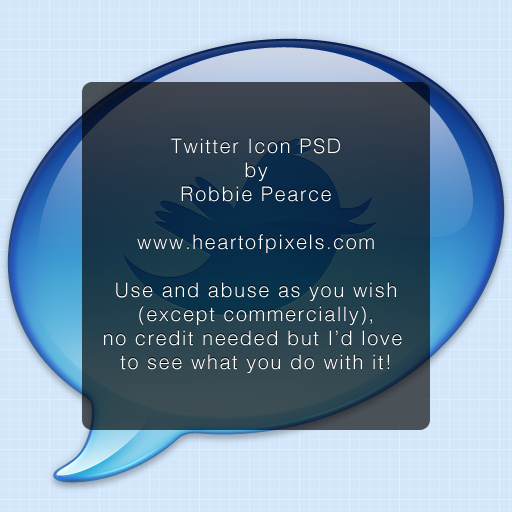
<style>
.page{position:relative;width:512px;height:512px;background:#d4e7fa}
.page>*{position:absolute;margin:0}
.t1{font:20px "Helvetica-Light";letter-spacing:0.075em;color:#ffffff}
</style>
<div class="page">
<p class="t1" style="left:104px;top:138px;width:298px;height:235px;text-align:center">Twitter Icon PSD<br>by<br>Robbie Pearce<br><br>www.heartofpixels.com<br><br>Use and abuse as you wish<br>(except commercially),<br>no credit needed but I’d love <br>to see what you do with it!</p>
</div>
